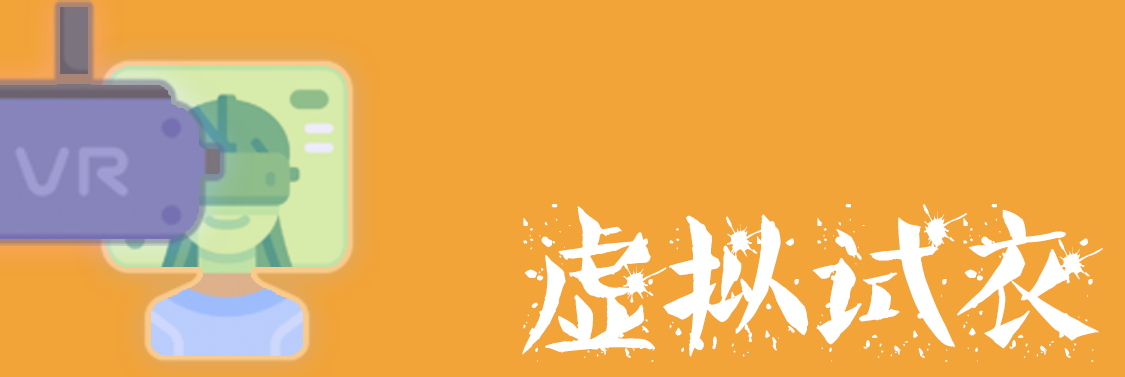
<style>
.page{position:relative;width:1125px;height:377px;background:#f3a438}
.page>*{position:absolute;margin:0}
.t1{font:150px "yegenyoufont";letter-spacing:-0.003em;color:#ffffff}
</style>
<div class="page">
<p class="t1" style="left:522px;top:204px;width:581px;height:158px">虚拟试衣</p>
</div>
